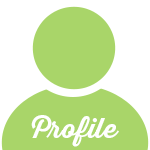
<style>
.page{position:relative;width:150px;height:150px;background:#a9d569}
.page>*{position:absolute;margin:0}
.t1{font:27px "ThirstyScript-Bold";color:#ffffff}
</style>
<div class="page">
<p class="t1" style="left:31px;top:115px;width:88px;height:32px">Profile</p>
</div>
